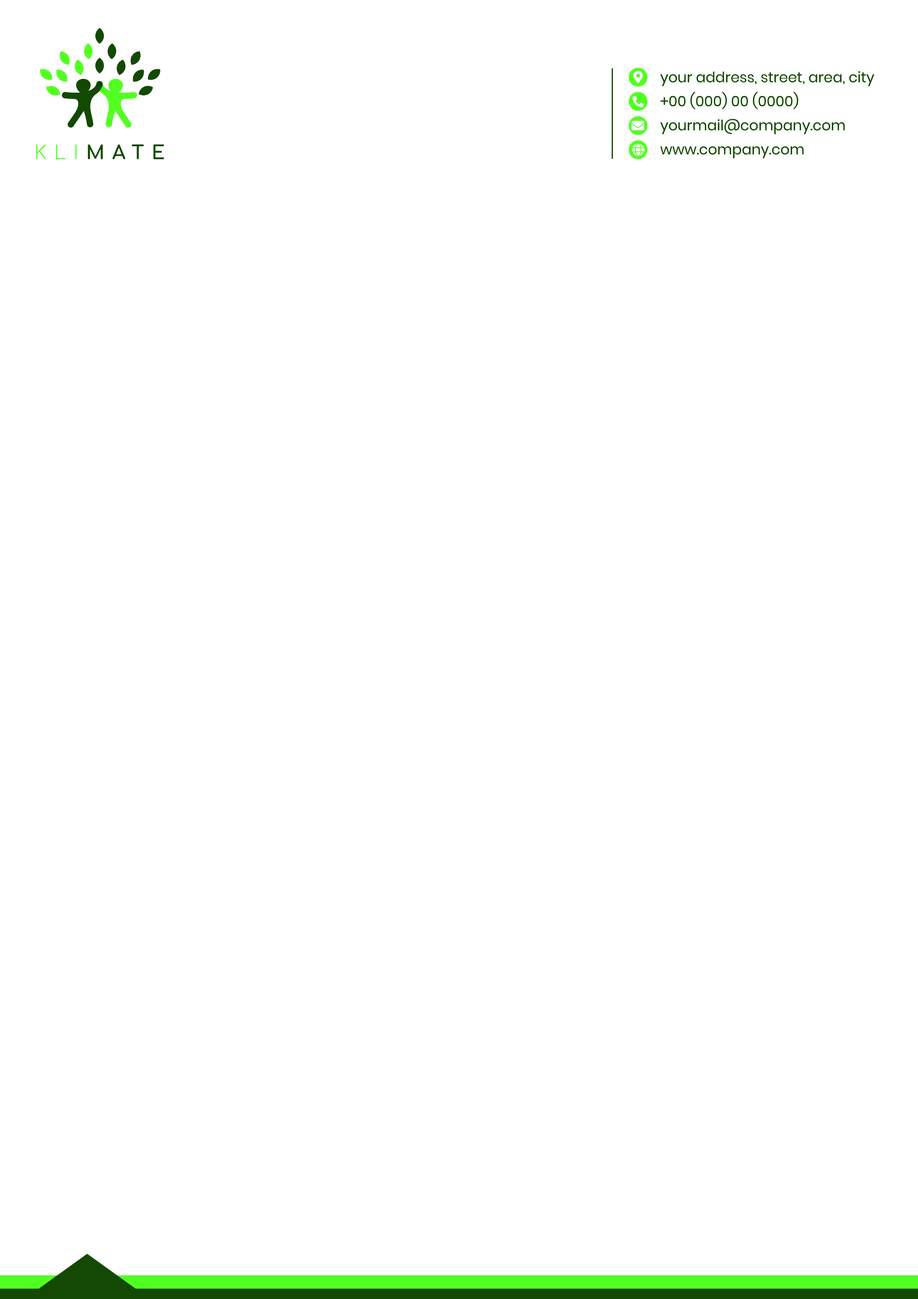
<style>
.page{position:relative;width:918px;height:1299px;background:#ffffff}
.page>*{position:absolute;margin:0}
.t1{font:14.4px/24px "Poppins-Regular";color:#134902}
</style>
<div class="page">
<p class="t1" style="left:660px;top:71px;width:214px;height:87px">your address, street, area, city<br>+00 (000) 00 (0000)<br>yourmail@company.com<br>www.company.com</p>
</div>
